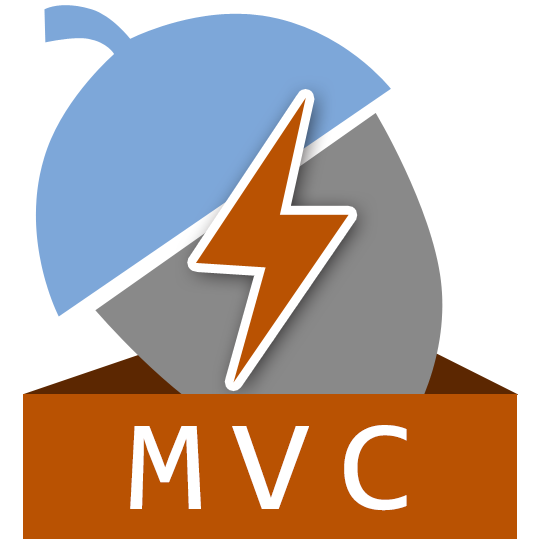
<style>
.page{position:relative;width:540px;height:543px;background:#ffffff}
.page>*{position:absolute;margin:0}
.t1{font:129.7px "Consolas";letter-spacing:0.2em;color:#ffffff;scale:1.08 1}
</style>
<div class="page">
<p class="t1" style="left:130px;top:425px;width:277px;height:86px">MVC</p>
</div>
